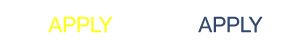
<style>
.page{position:relative;width:300px;height:50px;background:#ffffff}
.page>*{position:absolute;margin:0}
.t1{font:22px "Panton-SemiBold";color:#ffff1c}
.t2{font:22px "Panton-SemiBold";color:#33476c}
</style>
<div class="page">
<p class="t1" style="left:48px;top:16px;width:65px;height:17px">APPLY</p>
<p class="t2" style="left:198px;top:16px;width:65px;height:17px">APPLY</p>
</div>
